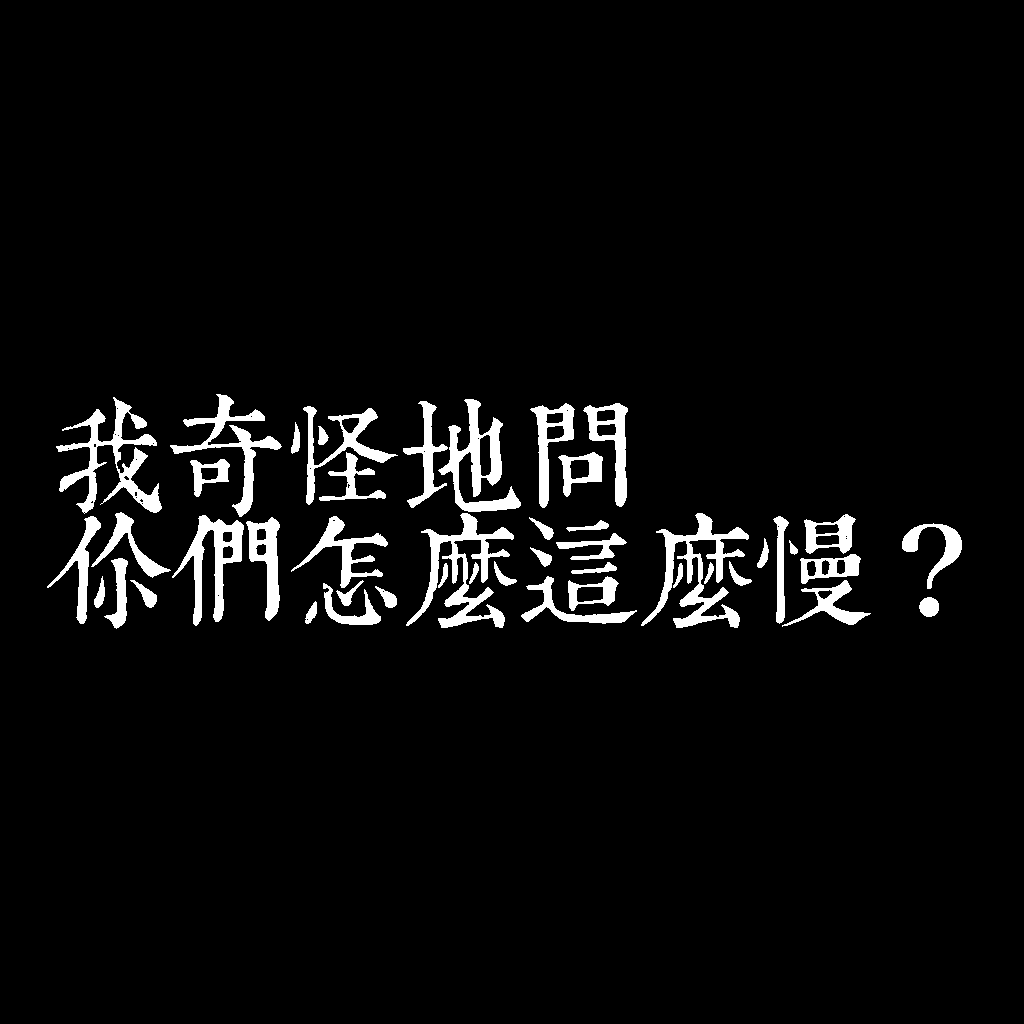
<style>
.page{position:relative;width:1024px;height:1024px;background:#000000}
.page>*{position:absolute;margin:0}
.t1{font:120px/115px "TpldKhangXiDictTrial";letter-spacing:-0.02em;color:#ffffff}
</style>
<div class="page">
<p class="t1" style="left:47px;top:394px;width:915px;height:235px">我奇怪地問<br>你們怎麼這麼慢？</p>
</div>
